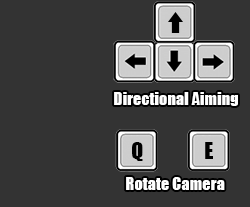
<style>
.page{position:relative;width:250px;height:207px;background:#333333}
.page>*{position:absolute;margin:0}
.t1{font:16.4px "Impact";color:#ffffff}
.t2{font:22px "Impact";color:#000000}
</style>
<div class="page">
<p class="t1" style="left:114px;top:92px;width:124px;height:14px">Directional Aiming</p>
<p class="t2" style="left:132px;top:142px;width:11px;height:19px">Q</p>
<p class="t2" style="left:205px;top:142px;width:8px;height:17px">E</p>
<p class="t1" style="left:126px;top:177px;width:99px;height:13px">Rotate Camera</p>
</div>
